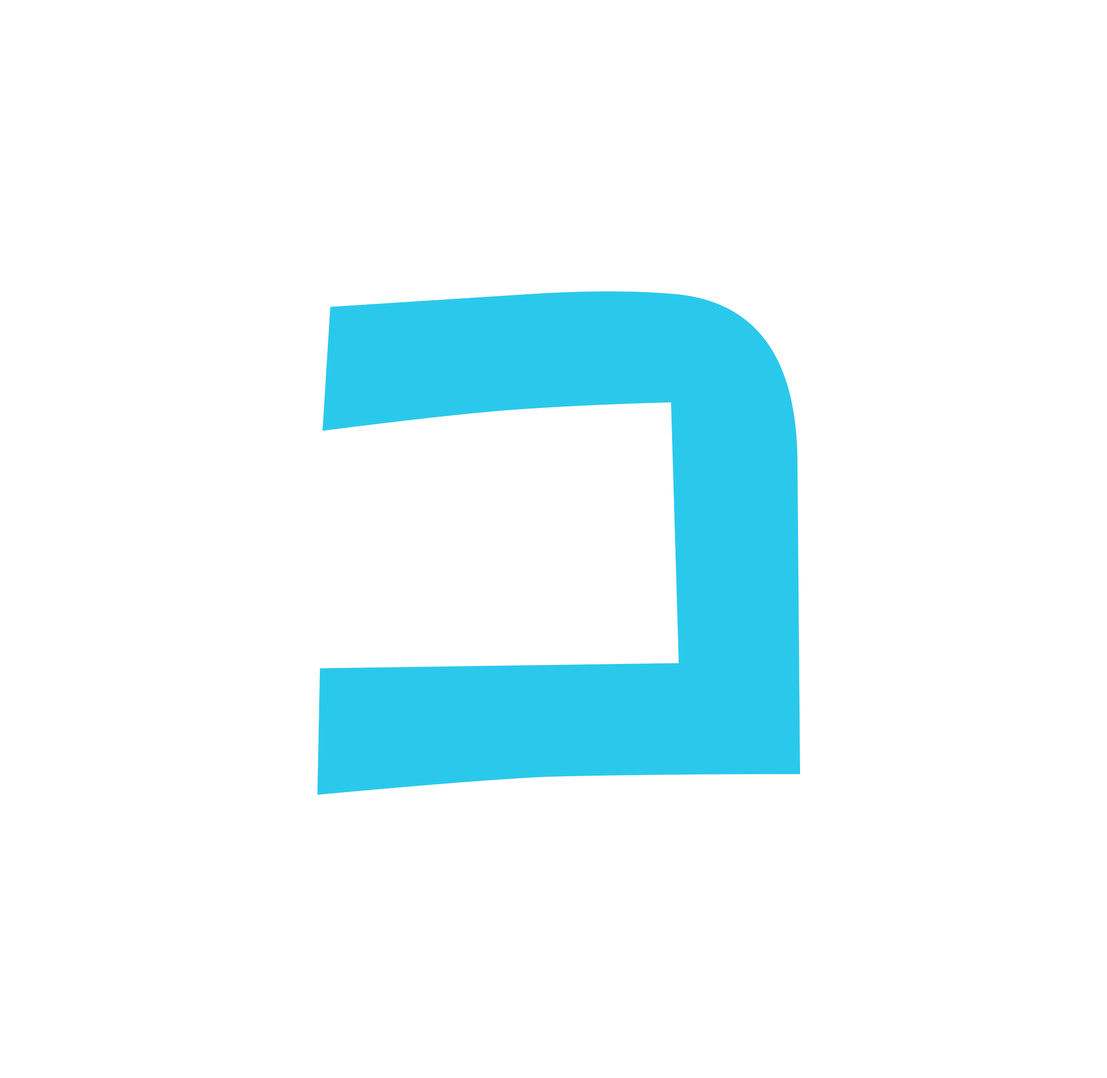
<style>
.page{position:relative;width:1107px;height:1078px;background:#ffffff}
.page>*{position:absolute;margin:0}
.t1{font:660.6px "HGPSoeiKakupoptai";letter-spacing:0.1em;color:#2ac9eb}
</style>
<div class="page">
<p class="t1" style="left:317px;top:291px;width:483px;height:504px">コ</p>
</div>
